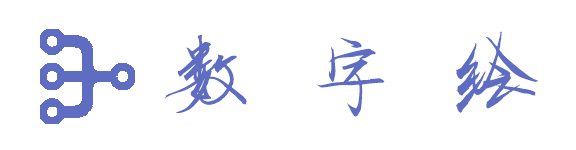
<style>
.page{position:relative;width:576px;height:150px;background:#ffffff}
.page>*{position:absolute;margin:0}
.t1{font:102.7px "HYChunRanShouShuW";color:#5e6dc1}
</style>
<div class="page">
<p class="t1" style="left:165px;top:31px;width:373px;height:86px">数 字 绘</p>
<p class="t1" style="left:165px;top:31px;width:373px;height:86px">数 字 绘</p>
</div>
